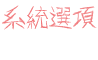
<style>
.page{position:relative;width:98px;height:60px;background:#ffffff}
.page>*{position:absolute;margin:0}
.t1{font:23.6px "onryou";color:#f1777a}
</style>
<div class="page">
<p class="t1" style="left:2px;top:5px;width:95px;height:25px">系統選項</p>
</div>
